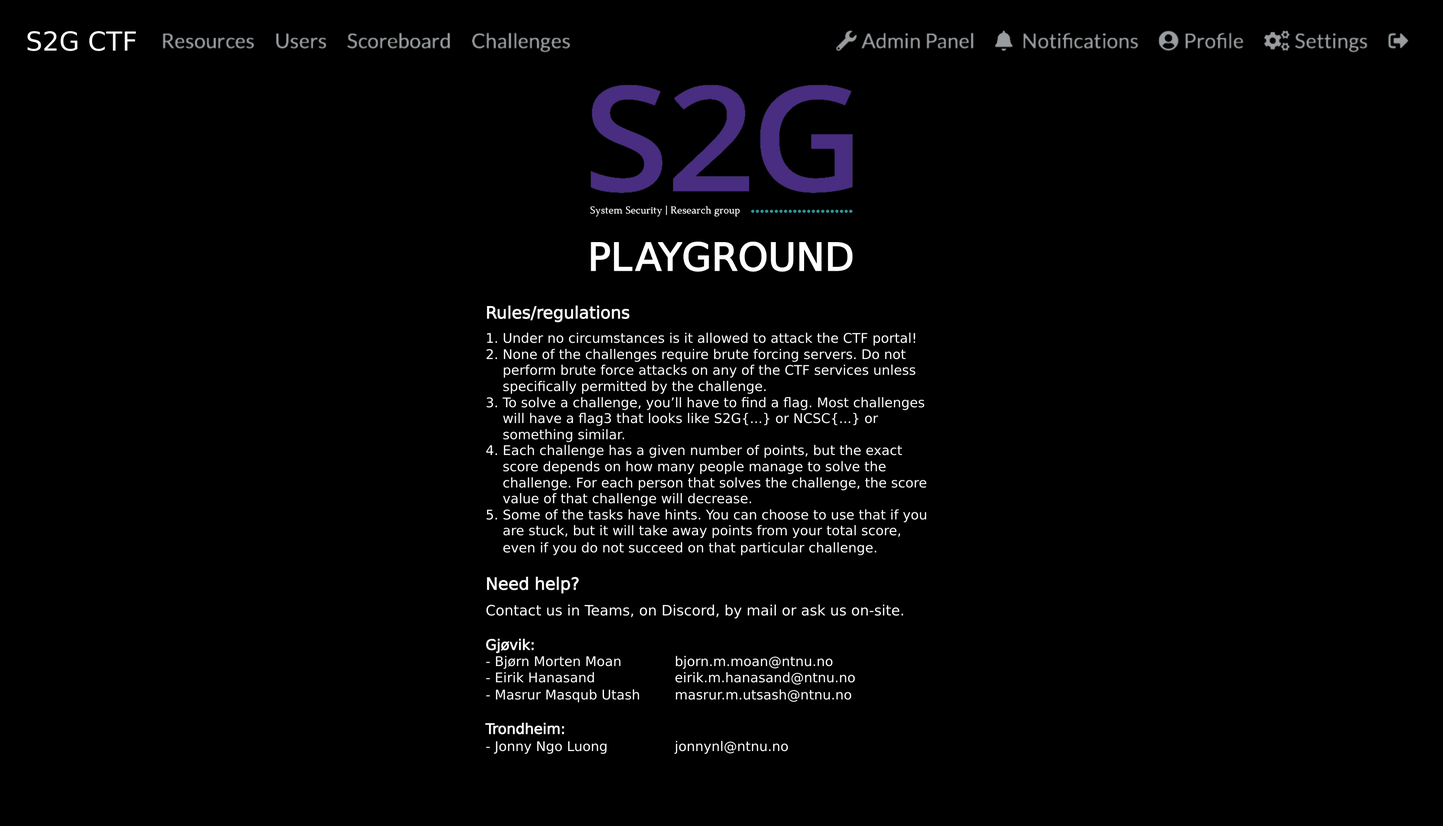
<style>
.page{position:relative;width:1443px;height:826px;background:#000000}
.page>*{position:absolute;margin:0}
.t1{font:26.3px "DejaVuSans";color:#ffffff}
.t2{font:13.4px "DejaVuSans";color:#ffffff}
.t3{font:16.7px "DejaVuSans";color:#ffffff}
.t4{font:14.3px "DejaVuSans";color:#ffffff}
</style>
<div class="page">
<p class="t1" style="left:27px;top:31px;width:109px;height:20px">S2G CTF</p>
<p class="t2" style="left:485px;top:305px;width:442px;height:450px"><span class="t3">Rules/regulations<br><br></span>1. Under no circumstances is it allowed to attack the CTF portal!<br>2. None of the challenges require brute forcing servers. Do not <br>    perform brute force attacks on any of the CTF services unless <br>    specifically permitted by the challenge.<br>3. To solve a challenge, you’ll have to find a flag. Most challenges <br>    will have a flag3 that looks like S2G{...} or NCSC{...} or <br>    something similar.<br>4. Each challenge has a given number of points, but the exact <br>    score depends on how many people manage to solve the <br>    challenge. For each person that solves the challenge, the score <br>    value of that challenge will decrease.<br>5. Some of the tasks have hints. You can choose to use that if you <br>    are stuck, but it will take away points from your total score, <br>    even if you do not succeed on that particular challenge.<br><br><span class="t3">Need help?<br><br></span><span class="t4">Contact us in Teams, on Discord, by mail or ask us on-site.<br><br>Gjøvik:<br></span>- Bjørn Morten Moan    bjorn.m.moan@ntnu.no<br>- Eirik Hanasand             eirik.m.hanasand@ntnu.no<br>- Masrur Masqub Utash  masrur.m.utsash@ntnu.no<br><br><span class="t4">Trondheim:<br></span>- Jonny Ngo Luong       jonnynl@ntnu.no</p>
</div>
